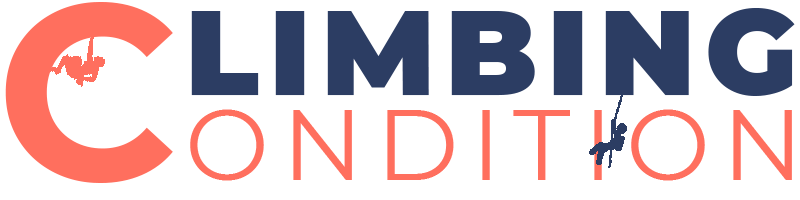
<style>
.page{position:relative;width:800px;height:200px;background:#ffffff}
.page>*{position:absolute;margin:0}
.t1{font:250px "Montserrat-Bold";letter-spacing:0.1em;color:#ff6f5e}
.t2{font:120px "Montserrat-Black";letter-spacing:0.08em;color:#2c3d63}
.t3{font:100px "Montserrat-Regular";letter-spacing:0.125em;color:#ff6f5e}
</style>
<div class="page">
<p class="t1" style="left:5px;top:2px;width:168px;height:181px">C</p>
<p class="t2" style="left:191px;top:8px;width:604px;height:88px">LIMBING</p>
<p class="t3" style="left:190px;top:109px;width:602px;height:72px">ONDITION</p>
</div>
